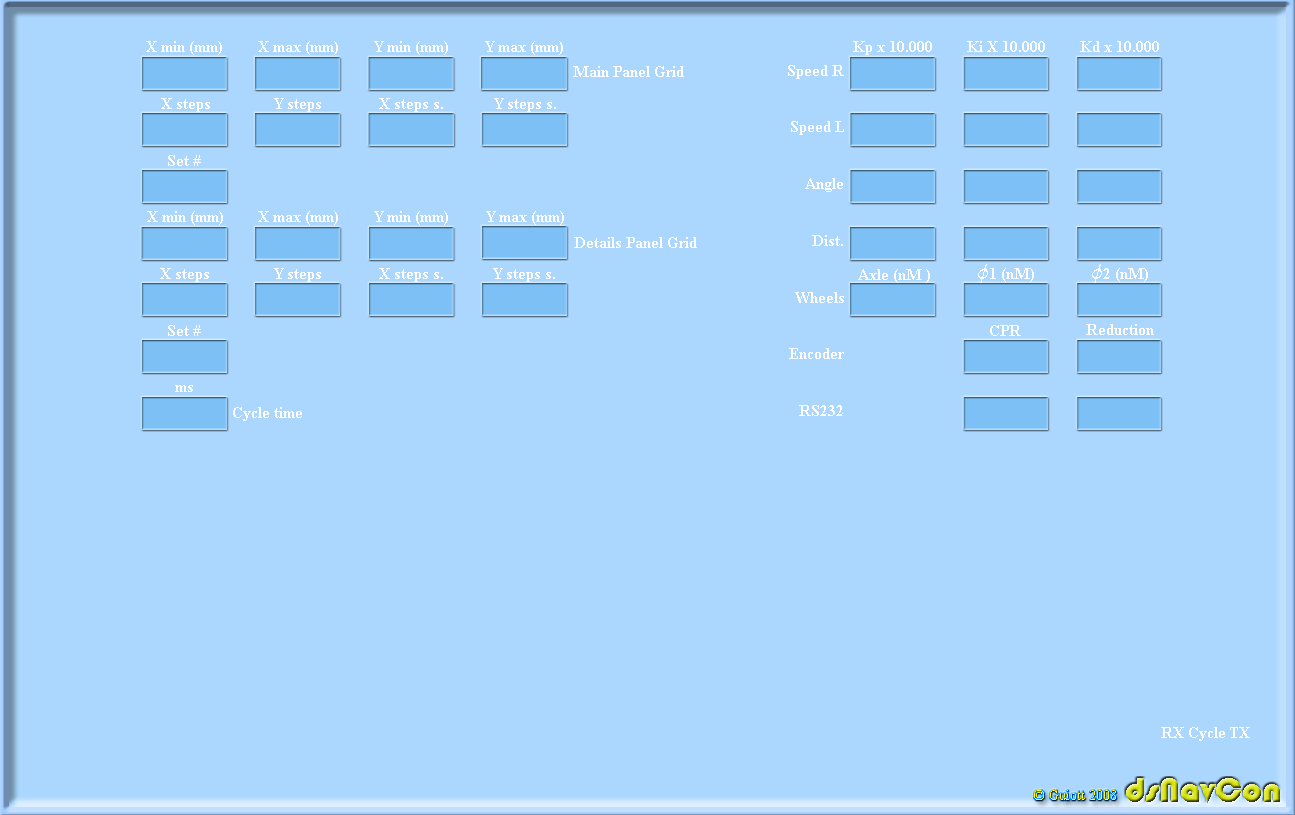
<style>
.page{position:relative;width:1295px;height:815px;background:#abd7fe}
.page>*{position:absolute;margin:0}
.t1{font:16px "TimesNewRomanPS-BoldMT";color:#ffffff}
.t2{font:24px "GaramondPremrPro-SmbdIt";color:#ffffff}
.t3{font:36px "Bauhaus93"}
.t4{font:14px "TimesNewRomanPSMT"}
</style>
<div class="page">
<p class="t1" style="left:146px;top:41px;width:76px;height:14px">X min (mm)</p>
<p class="t1" style="left:258px;top:41px;width:80px;height:14px">X max (mm)</p>
<p class="t1" style="left:374px;top:41px;width:74px;height:14px">Y min (mm)</p>
<p class="t1" style="left:485px;top:41px;width:78px;height:14px">Y max (mm)</p>
<p class="t1" style="left:853px;top:41px;width:79px;height:14px">Kp x 10.000</p>
<p class="t1" style="left:967px;top:41px;width:78px;height:11px">Ki X 10.000</p>
<p class="t1" style="left:1080px;top:41px;width:79px;height:11px">Kd x 10.000</p>
<p class="t1" style="left:788px;top:65px;width:56px;height:14px">Speed R</p>
<p class="t1" style="left:573px;top:66px;width:111px;height:11px">Main Panel Grid</p>
<p class="t1" style="left:161px;top:98px;width:49px;height:14px">X steps</p>
<p class="t1" style="left:274px;top:98px;width:47px;height:14px">Y steps</p>
<p class="t1" style="left:379px;top:98px;width:64px;height:14px">X steps s.</p>
<p class="t1" style="left:494px;top:98px;width:62px;height:14px">Y steps s.</p>
<p class="t1" style="left:791px;top:121px;width:53px;height:14px">Speed L</p>
<p class="t1" style="left:168px;top:155px;width:33px;height:11px">Set #</p>
<p class="t1" style="left:805px;top:178px;width:38px;height:14px">Angle</p>
<p class="t1" style="left:147px;top:211px;width:76px;height:14px">X min (mm)</p>
<p class="t1" style="left:258px;top:211px;width:80px;height:14px">X max (mm)</p>
<p class="t1" style="left:374px;top:211px;width:74px;height:14px">Y min (mm)</p>
<p class="t1" style="left:486px;top:211px;width:78px;height:14px">Y max (mm)</p>
<p class="t1" style="left:574px;top:237px;width:123px;height:11px">Details Panel Grid</p>
<p class="t1" style="left:812px;top:235px;width:31px;height:11px">Dist.</p>
<p class="t1" style="left:160px;top:268px;width:49px;height:14px">X steps</p>
<p class="t1" style="left:274px;top:268px;width:47px;height:14px">Y steps</p>
<p class="t1" style="left:379px;top:268px;width:64px;height:14px">X steps s.</p>
<p class="t1" style="left:493px;top:268px;width:62px;height:14px">Y steps s.</p>
<p class="t1" style="left:858px;top:269px;width:72px;height:14px">Axle (nM )</p>
<p class="t1" style="left:978px;top:264px;width:56px;height:21px"><span class="t2">ϕ</span>1 (nM)</p>
<p class="t1" style="left:1092px;top:264px;width:56px;height:21px"><span class="t2">ϕ</span>2 (nM)</p>
<p class="t1" style="left:795px;top:292px;width:49px;height:11px">Wheels</p>
<p class="t1" style="left:168px;top:325px;width:33px;height:11px">Set #</p>
<p class="t1" style="left:990px;top:325px;width:31px;height:11px">CPR</p>
<p class="t1" style="left:1086px;top:324px;width:68px;height:11px">Reduction</p>
<p class="t1" style="left:789px;top:348px;width:55px;height:11px">Encoder</p>
<p class="t1" style="left:175px;top:385px;width:18px;height:7px">ms</p>
<p class="t1" style="left:233px;top:407px;width:69px;height:14px">Cycle time</p>
<p class="t1" style="left:799px;top:405px;width:44px;height:11px">RS232</p>
<p class="t1" style="left:1161px;top:727px;width:23px;height:11px">RX</p>
<p class="t1" style="left:1189px;top:727px;width:36px;height:14px">Cycle</p>
<p class="t1" style="left:1230px;top:727px;width:20px;height:11px">TX</p>
<p class="t3" style="left:1126px;top:778px;width:154px;height:25px">dsNavCon</p>
<p class="t4" style="left:1034px;top:790px;width:82px;height:10px">© Guiott 2008</p>
</div>
